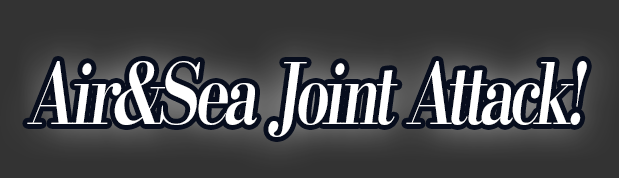
<style>
.page{position:relative;width:619px;height:178px;background:#333333}
.page>*{position:absolute;margin:0}
.t1{font:84px "KochoStd-Heavy";letter-spacing:-0.08em;color:#ffffff;font-style:italic;scale:0.75 1}
</style>
<div class="page">
<p class="t1" style="left:27px;top:61px;width:560px;height:76px">Air&amp;Sea Joint Attack!</p>
</div>
